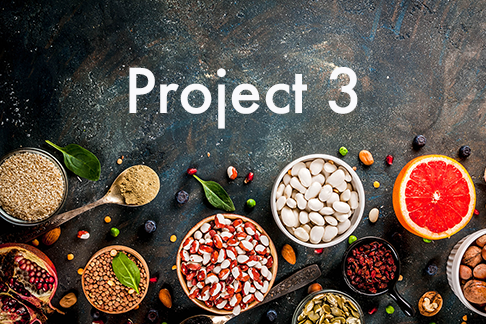
<style>
.page{position:relative;width:486px;height:324px}
.page>*{position:absolute;margin:0}
.t1{font:60px "Futura-Medium";color:#f9f9fb}
</style>
<div class="page">
<p class="t1" style="left:129px;top:67px;width:229px;height:62px">Project 3</p>
</div>
